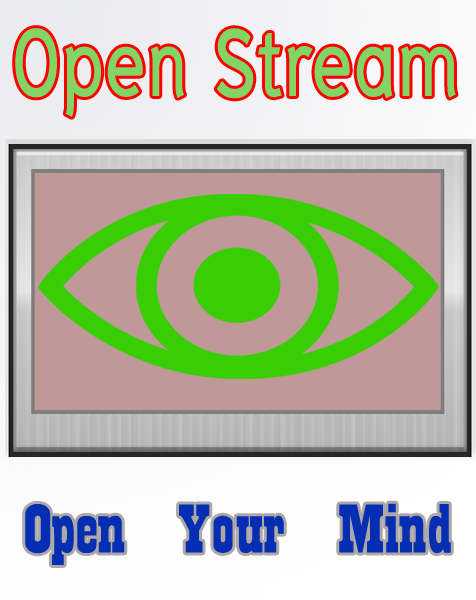
<style>
.page{position:relative;width:476px;height:600px;background:#bf9898}
.page>*{position:absolute;margin:0}
.t1{font:139.2px "THNiramitAS-Bold";color:#81d465;scale:0.77 1}
.t2{font:96.8px "TS-Country-E-NP-Bold";color:#062eb2;scale:1.48 1}
</style>
<div class="page">
<p class="t1" style="left:15px;top:28px;width:441px;height:89px">Open Stream</p>
<p class="t2" style="left:25px;top:503px;width:426px;height:62px">Open Your Mind</p>
</div>
